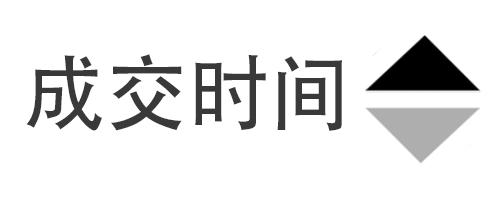
<style>
.page{position:relative;width:500px;height:200px;background:#ffffff}
.page>*{position:absolute;margin:0}
.t1{font:82px "AdobeHeitiStd-Regular";color:#393939}
</style>
<div class="page">
<p class="t1" style="left:26px;top:54px;width:316px;height:77px">成交时间</p>
</div>
